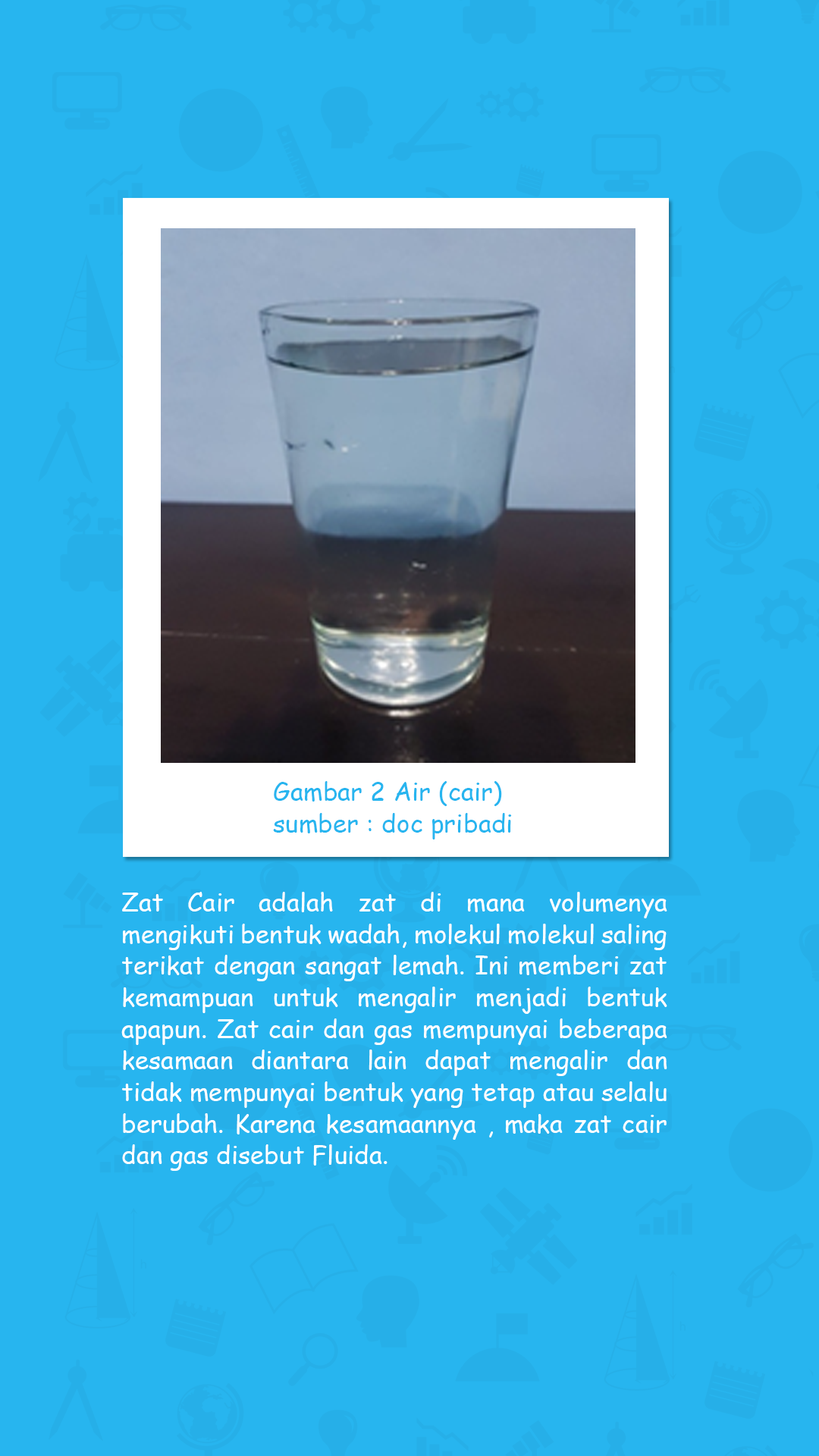
<style>
.page{position:relative;width:819px;height:1456px;background:#27b5ef}
.page>*{position:absolute;margin:0}
.t1{font:25.3px/31.6px "ComicSansMS";color:#27b5ef}
.t2{font:25.3px/31.6px "ComicSansMS";color:#ffffff}
</style>
<div class="page">
<p class="t1" style="left:273px;top:781px;width:239px;height:58px;text-align:justify">Gambar 2 Air (cair)<br>sumber : doc pribadi</p>
<p class="t2" style="left:121px;top:892px;width:546px;height:279px;text-align:justify">Zat Cair adalah zat di mana volumenya mengikuti bentuk wadah, molekul molekul saling terikat dengan sangat lemah. Ini memberi zat kemampuan untuk mengalir menjadi bentuk apapun. Zat cair dan gas mempunyai beberapa kesamaan diantara lain dapat mengalir dan tidak mempunyai bentuk yang tetap atau selalu berubah. Karena kesamaannya , maka zat cair dan gas disebut Fluida.</p>
</div>
